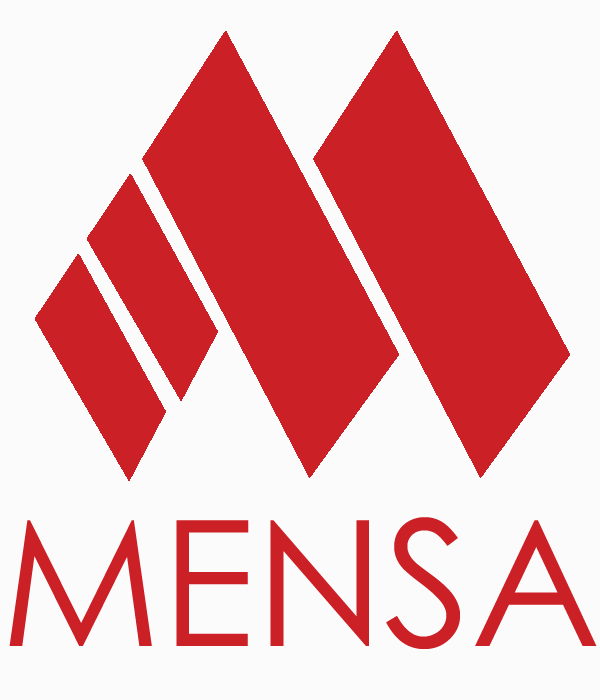
<style>
.page{position:relative;width:600px;height:700px;background:#fcfbfb}
.page>*{position:absolute;margin:0}
.t1{font:175px "CenturyGothic";color:#cc2027}
</style>
<div class="page">
<p class="t1" style="left:9px;top:517px;width:588px;height:132px">MENSA</p>
</div>
